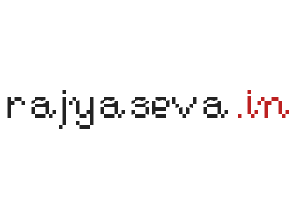
<style>
.page{position:relative;width:298px;height:200px;background:#ffffff}
.page>*{position:absolute;margin:0}
.t1{font:56.1px "RSEHandwritingPi";letter-spacing:-0.01em;color:#222222}
.t2{font:56.1px "RSEHandwritingPi";letter-spacing:-0.01em;color:#bc2020}
</style>
<div class="page">
<p class="t1" style="left:7px;top:90px;width:282px;height:39px">rajyaseva<span class="t2">.in</span></p>
</div>
